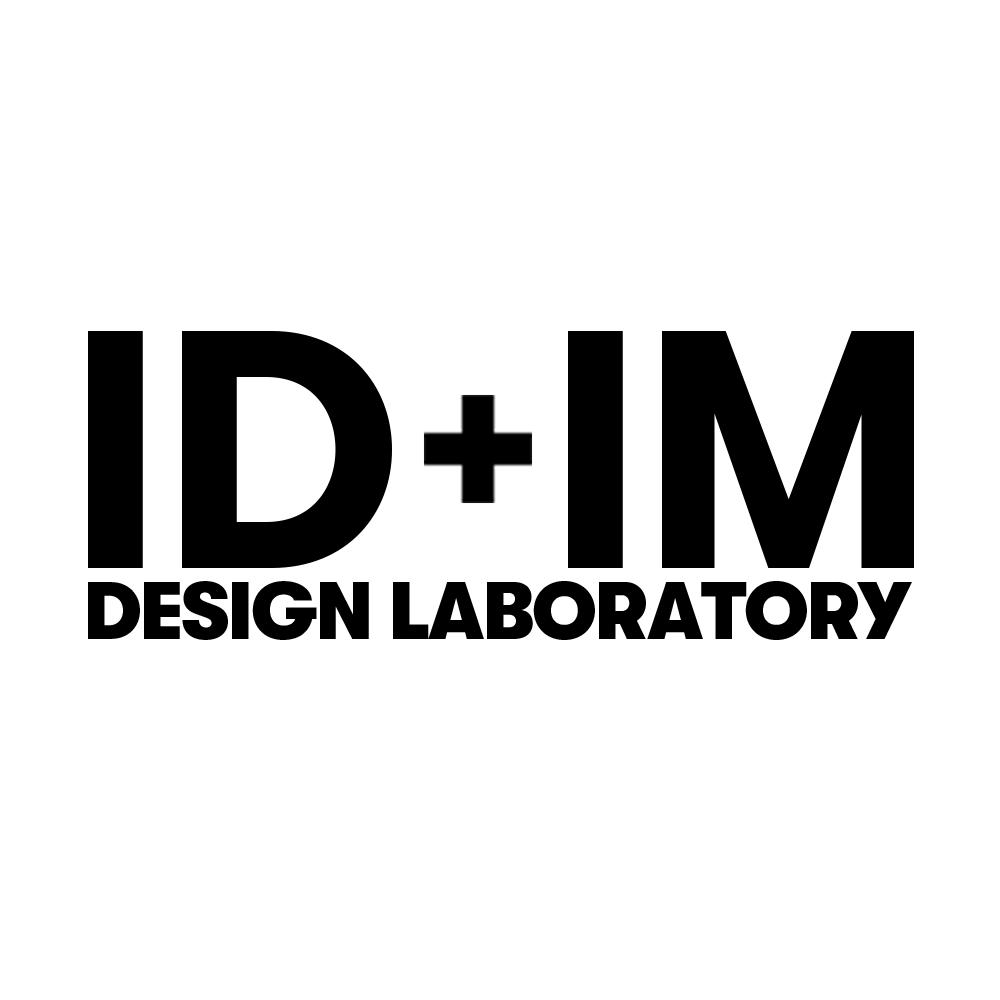
<style>
.page{position:relative;width:1000px;height:1000px;background:#ffffff}
.page>*{position:absolute;margin:0}
.t1{font:338.2px "GTWalsheimProTrial-Bold";letter-spacing:-0.02em;color:#000000}
.t2{font:81.5px "GTWalsheimProTrial-Black";letter-spacing:-0.03em;color:#000000}
</style>
<div class="page">
<p class="t1" style="left:88px;top:331px;width:826px;height:237px">ID  IM</p>
<p class="t2" style="left:88px;top:581px;width:824px;height:59px">DESIGN LABORATORY</p>
</div>
